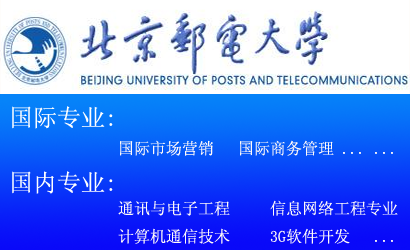
<style>
.page{position:relative;width:410px;height:250px}
.page>*{position:absolute;margin:0}
.t1{font:24px "SimSun";color:#ffffff}
.t2{font:16px "SimSun";color:#fff9f9}
</style>
<div class="page">
<p class="t1" style="left:12px;top:106px;width:101px;height:23px">国际专业:</p>
<p class="t2" style="left:120px;top:140px;width:273px;height:16px">国际市场营销   国际商务管理 ... ...</p>
<p class="t1" style="left:12px;top:171px;width:101px;height:23px">国内专业:</p>
<p class="t2" style="left:118px;top:200px;width:280px;height:44px">通讯与电子工程     信息网络工程专业<br>计算机通信技术     3G软件开发   ...</p>
</div>
